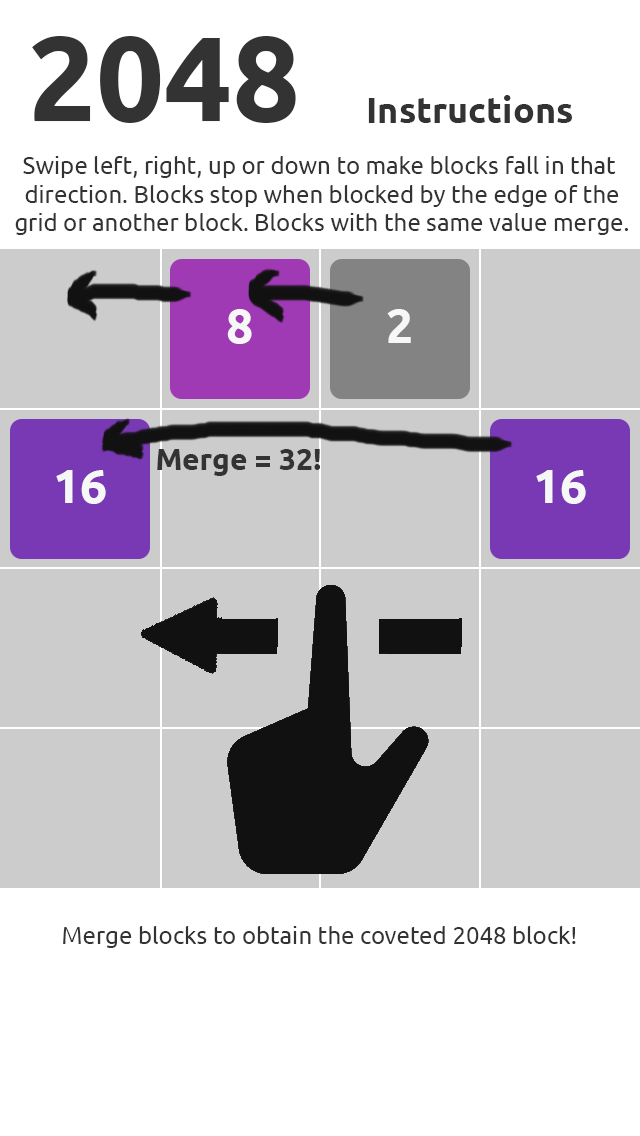
<style>
.page{position:relative;width:640px;height:1136px;background:#cccccc}
.page>*{position:absolute;margin:0}
.t1{font:120px "Ubuntu-Bold";color:#333333}
.t2{font:36px "Ubuntu-Bold";color:#333333}
.t3{font:24px "Ubuntu";color:#333333}
.t4{font:48px "Ubuntu-Bold";color:#f7f7f7}
.t5{font:30px "Ubuntu-Bold";color:#333333}
</style>
<div class="page">
<p class="t1" style="left:32px;top:36px;width:264px;height:87px">2048</p>
<p class="t2" style="left:368px;top:95px;width:204px;height:28px">Instructions</p>
<p class="t3" style="left:15px;top:156px;width:613px;height:79px;text-align:center">Swipe left, right, up or down to make blocks fall in that <br>direction. Blocks stop when blocked by the edge of the<br>grid or another block. Blocks with the same value merge.</p>
<p class="t4" style="left:227px;top:309px;width:25px;height:35px">8</p>
<p class="t4" style="left:387px;top:309px;width:24px;height:34px">2</p>
<p class="t5" style="left:157px;top:449px;width:163px;height:27px">Merge = 32!</p>
<p class="t4" style="left:56px;top:470px;width:50px;height:34px">16</p>
<p class="t4" style="left:536px;top:470px;width:50px;height:34px">16</p>
<p class="t3" style="left:63px;top:926px;width:513px;height:22px">Merge blocks to obtain the coveted 2048 block!</p>
</div>
